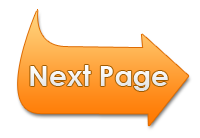
<style>
.page{position:relative;width:200px;height:138px;background:#ffffff}
.page>*{position:absolute;margin:0}
.t1{font:27.9px "CenturyGothic-Bold";color:#f1f1f1}
</style>
<div class="page">
<p class="t1" style="left:30px;top:65px;width:138px;height:26px">Next Page</p>
</div>
